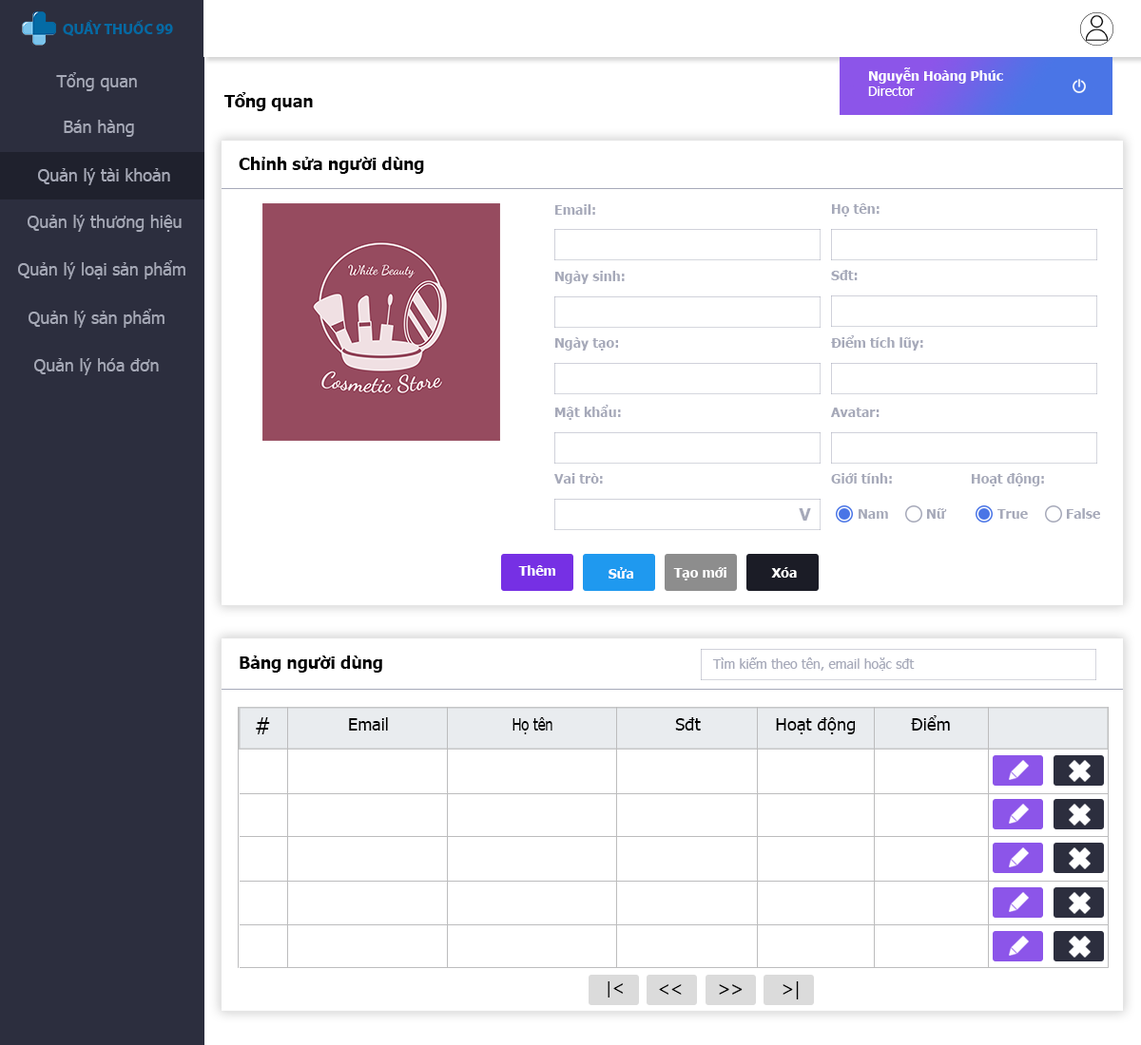
<style>
.page{position:relative;width:1141px;height:1045px;background:#ffffff}
.page>*{position:absolute;margin:0}
.t1{font:15.2px "MyriadPro-Bold";color:#036aa4}
.t2{font:17.1px "Tahoma";color:#a6a9b7}
.t3{font:13.3px "Tahoma-Bold";color:#ffffff}
.t4{font:13.3px "Tahoma";color:#ffffff}
.t5{font:17.1px "Tahoma-Bold";color:#010101}
.t6{font:16.8px "Tahoma-Bold";color:#000000}
.t7{font:13.3px "Tahoma-Bold";color:#a6a9b9}
.t8{font:17.1px "Tahoma-Bold";color:#a6a9b9}
.t9{font:13.3px "Tahoma";color:#a6a9b9}
.t10{font:22.8px "Tahoma";color:#000000}
.t11{font:17.1px "Tahoma";color:#000000}
.t12{font:17.1px "Tahoma";color:#000000;scale:0.81 1}
.t13{font:17px "Tahoma";color:#000000}
.t14{font:17.5px "Tahoma";color:#000000}
.t15{font:17.8px "Tahoma";color:#000000}
.t16{font:17.8px "Tahoma";color:#000000;scale:0.96 1}
</style>
<div class="page">
<p class="t1" style="left:63px;top:20px;width:110px;height:16px">QUẦY THUỐC 99</p>
<p class="t2" style="left:56px;top:72px;width:81px;height:19px">Tổng quan</p>
<p class="t3" style="left:868px;top:67px;width:135px;height:29px">Nguyễn Hoàng Phúc<br><span class="t4">Director</span></p>
<p class="t5" style="left:224px;top:92px;width:89px;height:19px">Tổng quan</p>
<p class="t2" style="left:64px;top:120px;width:70px;height:17px">Bán hàng</p>
<p class="t6" style="left:239px;top:157px;width:185px;height:17px">Chỉnh sửa người dùng</p>
<p class="t2" style="left:38px;top:168px;width:132px;height:17px">Quản lý tài khoản</p>
<p class="t7" style="left:555px;top:204px;width:40px;height:11px">Email:</p>
<p class="t7" style="left:832px;top:203px;width:47px;height:14px">Họ tên:</p>
<p class="t2" style="left:28px;top:215px;width:154px;height:17px">Quản lý thương hiệu</p>
<p class="t2" style="left:18px;top:260px;width:167px;height:19px">Quản lý loại sản phẩm</p>
<p class="t7" style="left:831px;top:270px;width:26px;height:10px">Sđt:</p>
<p class="t7" style="left:555px;top:271px;width:69px;height:13px">Ngày sinh:</p>
<p class="t2" style="left:29px;top:309px;width:135px;height:19px">Quản lý sản phẩm</p>
<p class="t7" style="left:555px;top:337px;width:63px;height:14px">Ngày tạo:</p>
<p class="t7" style="left:831px;top:336px;width:92px;height:15px">Điểm tích lũy:</p>
<p class="t2" style="left:34px;top:358px;width:125px;height:17px">Quản lý hóa đơn</p>
<p class="t7" style="left:555px;top:405px;width:66px;height:15px">Mật khẩu:</p>
<p class="t7" style="left:831px;top:408px;width:48px;height:9px">Avatar:</p>
<p class="t7" style="left:554px;top:473px;width:49px;height:11px">Vai trò:</p>
<p class="t7" style="left:831px;top:473px;width:61px;height:11px">Giới tính:</p>
<p class="t7" style="left:971px;top:473px;width:73px;height:14px">Hoạt động:</p>
<p class="t8" style="left:798px;top:508px;width:13px;height:13px">V</p>
<p class="t7" style="left:858px;top:509px;width:30px;height:10px">Nam</p>
<p class="t7" style="left:927px;top:508px;width:20px;height:11px">Nữ</p>
<p class="t7" style="left:997px;top:509px;width:30px;height:10px">True</p>
<p class="t7" style="left:1066px;top:508px;width:34px;height:11px">False</p>
<p class="t3" style="left:518px;top:566px;width:37px;height:10px">Thêm</p>
<p class="t3" style="left:608px;top:567px;width:25px;height:12px">Sửa</p>
<p class="t3" style="left:673px;top:567px;width:53px;height:14px">Tạo mới</p>
<p class="t3" style="left:771px;top:567px;width:25px;height:11px">Xóa</p>
<p class="t6" style="left:240px;top:656px;width:142px;height:17px">Bảng người dùng</p>
<p class="t9" style="left:712px;top:658px;width:202px;height:13px">Tìm kiếm theo tên, email hoặc sđt</p>
<p class="t10" style="left:256px;top:718px;width:14px;height:17px">#</p>
<p class="t11" style="left:349px;top:718px;width:39px;height:13px">Email</p>
<p class="t12" style="left:512px;top:718px;width:40px;height:17px">Họ tên</p>
<p class="t11" style="left:675px;top:718px;width:25px;height:13px">Sđt</p>
<p class="t11" style="left:776px;top:718px;width:79px;height:17px">Hoạt động</p>
<p class="t13" style="left:911px;top:716px;width:39px;height:15px">Điểm</p>
<p class="t14" style="left:607px;top:982px;width:16px;height:16px">|&lt;</p>
<p class="t14" style="left:659px;top:985px;width:22px;height:10px">&lt;&lt;</p>
<p class="t15" style="left:719px;top:985px;width:23px;height:10px;rotate:180deg">&lt;&lt;</p>
<p class="t16" style="left:782px;top:982px;width:16px;height:18px;rotate:180deg">|&lt;</p>
</div>
